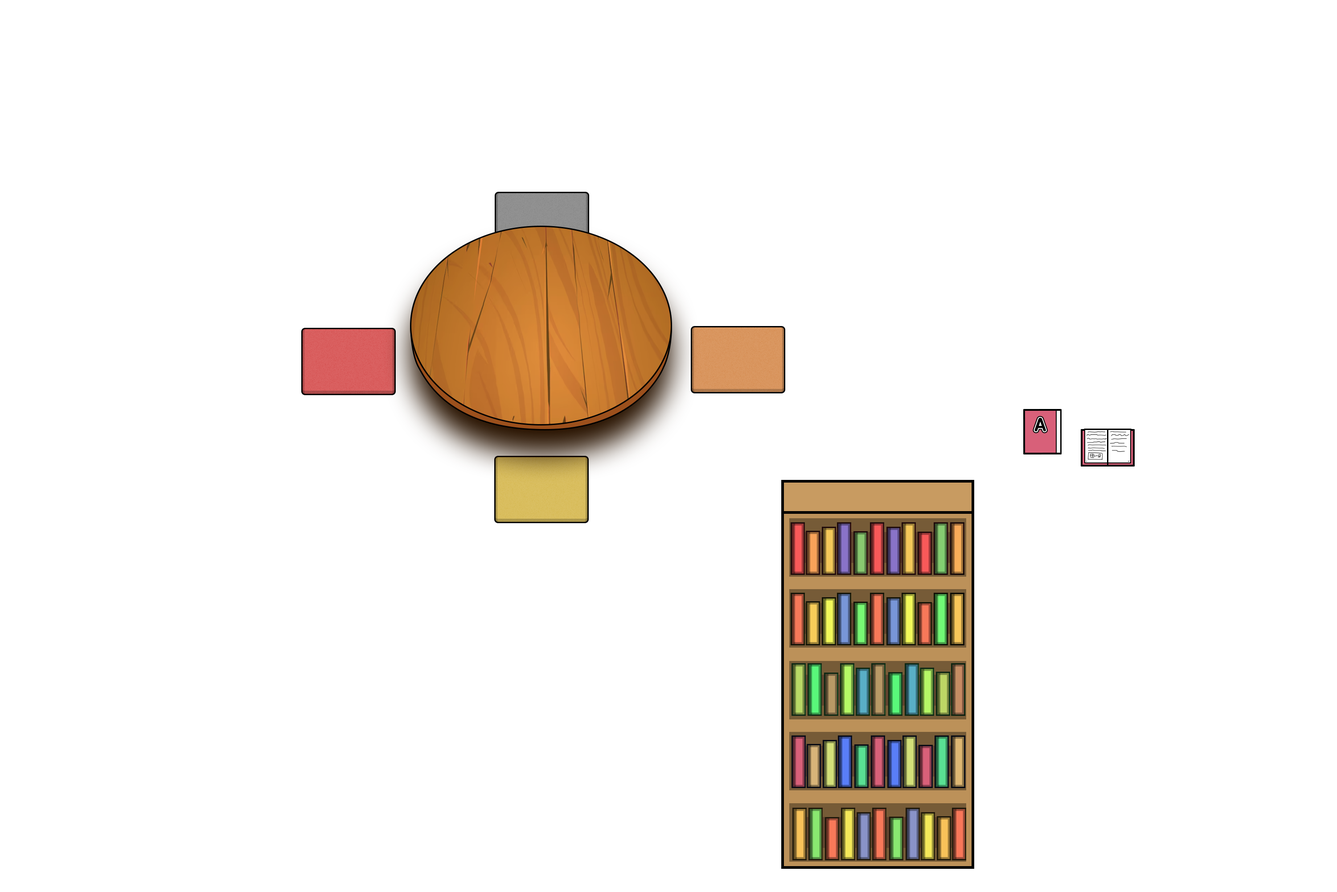
<style>
.page{position:relative;width:1337px;height:892px;background:#ffffff}
.page>*{position:absolute;margin:0}
.t1{font:17.8px "Cafe24Ssurround";color:#000000}
</style>
<div class="page">
<p class="t1" style="left:1035px;top:417px;width:11px;height:15px">A</p>
</div>
